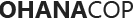
<style>
.page{position:relative;width:133px;height:19px;background:#ffffff}
.page>*{position:absolute;margin:0}
.t1{font:24px "MicrosoftTaiLe-Bold";color:#222222}
.t2{font:24px "MicrosoftTaiLe";color:#222222}
</style>
<div class="page">
<p class="t1" style="left:0px;top:1px;width:134px;height:17px">OHANA<span class="t2">COP</span></p>
</div>
